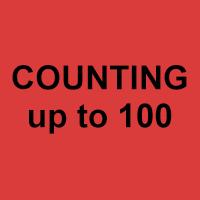
<style>
.page{position:relative;width:200px;height:200px;background:#da3b3b}
.page>*{position:absolute;margin:0}
.t1{font:33.3px "Arial-BoldMT";color:#000000}
</style>
<div class="page">
<p class="t1" style="left:12px;top:65px;width:175px;height:25px">COUNTING</p>
<p class="t1" style="left:29px;top:103px;width:143px;height:31px">up to 100</p>
</div>
